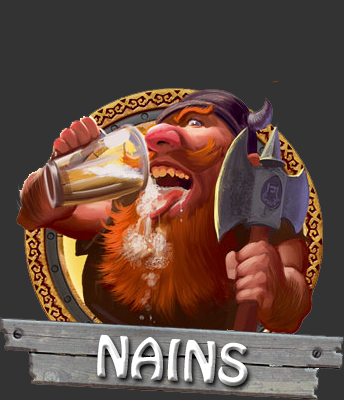
<style>
.page{position:relative;width:344px;height:400px;background:#333333}
.page>*{position:absolute;margin:0}
.t1{font:50px "HoboStd"}
</style>
<div class="page">
<p class="t1" style="left:97px;top:334px;width:151px;height:52px;rotate:4deg">NAINS</p>
</div>
